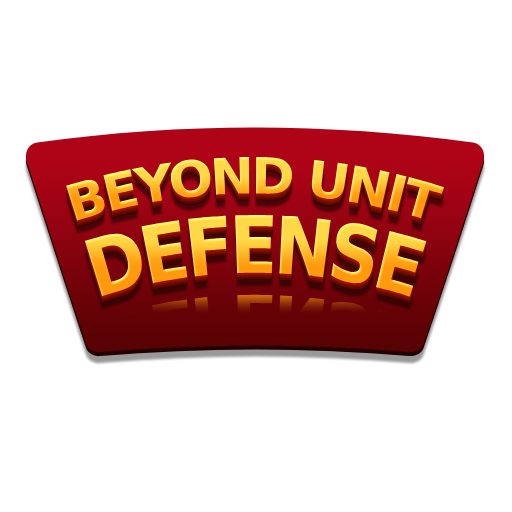
<style>
.page{position:relative;width:512px;height:512px;background:#ffffff}
.page>*{position:absolute;margin:0}
.t1{font:50px "AsketCondensed-ExtraBold";letter-spacing:-0.05em;text-transform:uppercase}
</style>
<div class="page">
<p class="t1" style="left:66px;top:157px;width:379px;height:64px">Beyond Unit</p>
</div>
